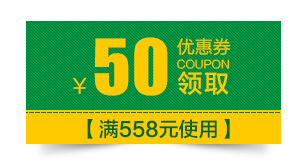
<style>
.page{position:relative;width:303px;height:165px;background:#ffffff}
.page>*{position:absolute;margin:0}
.t1{font:92px "UUSUKKUFI_1-Bold";color:#ffca00}
.t2{font:18px "FZLTHJW--GB1-0";color:#ffca00}
.t3{font:11px "FZLTKHK--GBK1-0";color:#ffca00}
.t4{font:20px "FZLTHJW--GB1-0";color:#ffca00}
.t5{font:25px "FZLTZHK--GBK1-0";letter-spacing:0.05em;color:#ffca00}
.t6{font:20px "FZLTZHK--GBK1-0";color:#016830}
</style>
<div class="page">
<p class="t1" style="left:94px;top:37px;width:74px;height:59px">50</p>
<p class="t2" style="left:177px;top:38px;width:54px;height:18px">优惠券</p>
<p class="t3" style="left:177px;top:59px;width:52px;height:10px">COUPON</p>
<p class="t4" style="left:73px;top:77px;width:14px;height:17px">￥</p>
<p class="t5" style="left:178px;top:71px;width:51px;height:24px">领取</p>
<p class="t6" style="left:87px;top:119px;width:143px;height:20px">【满558元使用】</p>
</div>
